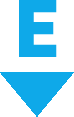
<style>
.page{position:relative;width:74px;height:117px;background:#ffffff}
.page>*{position:absolute;margin:0}
.t1{font:84.4px "DDCHardware-Regular";letter-spacing:0.8em;color:#0ea9e9}
</style>
<div class="page">
<p class="t1" style="left:19px;top:0px;width:38px;height:57px">E</p>
</div>
